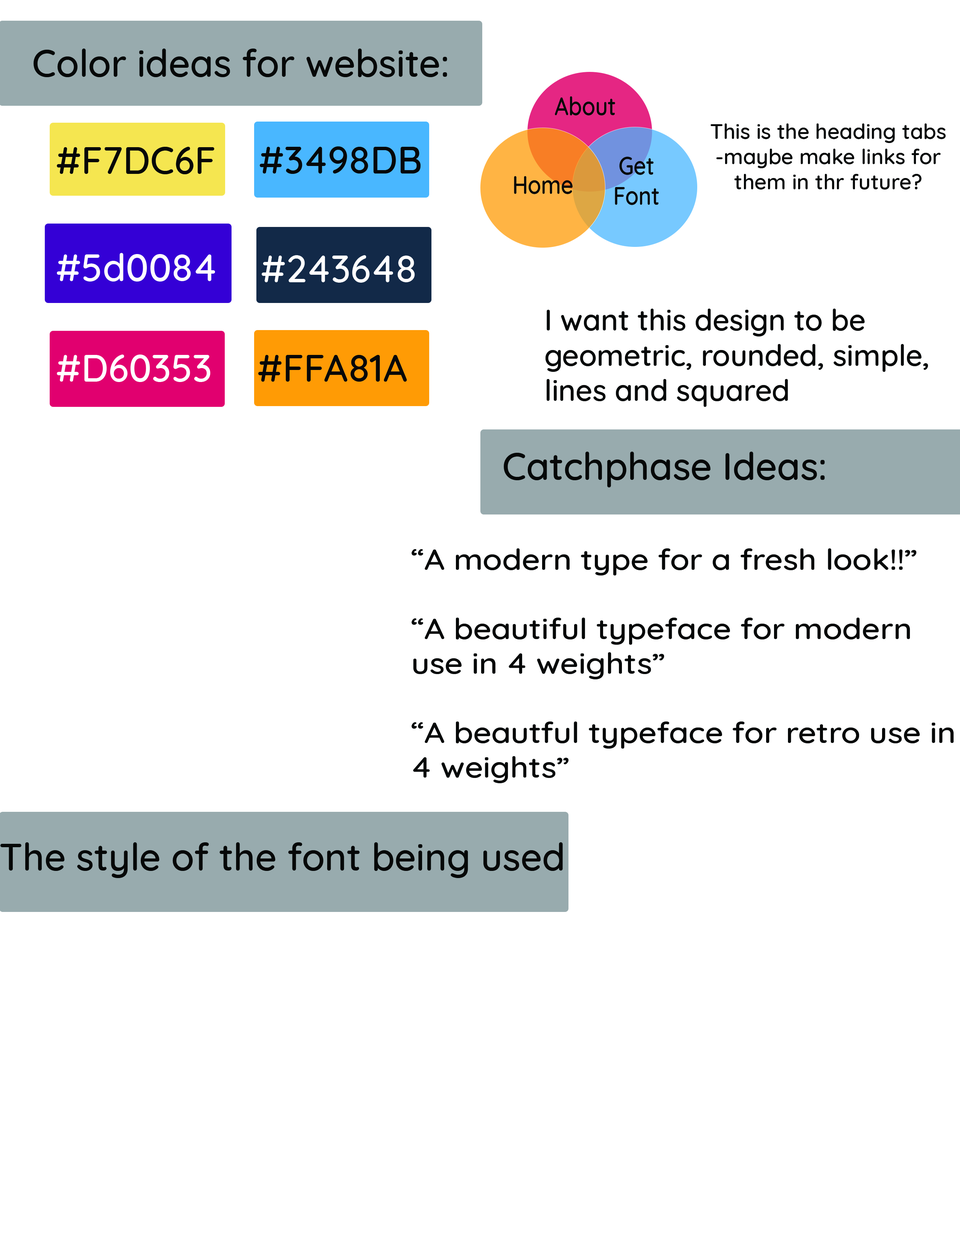
<style>
.page{position:relative;width:960px;height:1242px;background:#ffffff}
.page>*{position:absolute;margin:0}
.t1{font:37.6px "Quicksand-Medium";color:#060808}
.t2{font:25.2px "Quicksand-Medium";color:#060808;scale:0.87 1}
.t3{font:21px "Quicksand-Medium";color:#060808}
.t4{font:37.6px "Quicksand-Medium";color:#ffffff}
.t5{font:29.4px "Quicksand-Medium";color:#060808}
.t6{font:28.9px "Quicksand-Medium";color:#060808;scale:1.1 1}
</style>
<div class="page">
<p class="t1" style="left:34px;top:49px;width:413px;height:28px">Color ideas for website:</p>
<p class="t2" style="left:555px;top:96px;width:60px;height:20px">About</p>
<p class="t3" style="left:710px;top:123px;width:236px;height:67px;text-align:center">This is the heading tabs -maybe make links for them in thr future?</p>
<p class="t1" style="left:57px;top:147px;width:157px;height:27px">#F7DC6F</p>
<p class="t1" style="left:260px;top:146px;width:160px;height:28px">#3498DB</p>
<p class="t2" style="left:615px;top:157px;width:44px;height:48px;text-align:center">Get Font</p>
<p class="t2" style="left:514px;top:176px;width:59px;height:18px">Home</p>
<p class="t4" style="left:57px;top:253px;width:158px;height:29px">#5d0084</p>
<p class="t4" style="left:262px;top:255px;width:153px;height:28px">#243648</p>
<p class="t5" style="left:545px;top:309px;width:383px;height:98px">I want this design to be geometric, rounded, simple, lines and squared</p>
<p class="t4" style="left:57px;top:355px;width:153px;height:27px">#D60353</p>
<p class="t1" style="left:258px;top:355px;width:149px;height:27px">#FFA81A</p>
<p class="t1" style="left:504px;top:452px;width:321px;height:35px">Catchphase Ideas:</p>
<p class="t6" style="left:411px;top:548px;width:543px;height:235px">“A modern type for a fresh look!!”<br><br>“A beautiful typeface for modern use in 4 weights”<br><br>“A beautful typeface for retro use in 4 weights”</p>
<p class="t1" style="left:0px;top:842px;width:563px;height:36px">The style of the font being used</p>
</div>
